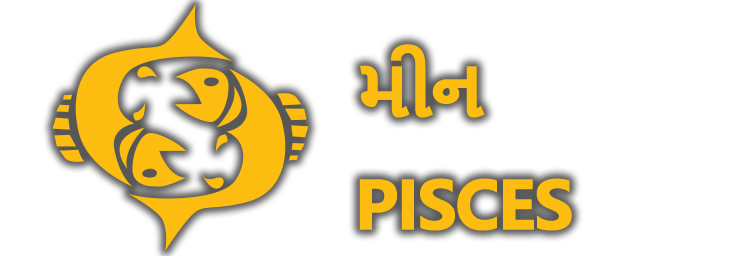
<style>
.page{position:relative;width:749px;height:256px;background:#ffffff}
.page>*{position:absolute;margin:0}
.t1{font:70.8px "NirmalaUI-Bold";letter-spacing:-0.05em;color:#fcbc10;text-transform:uppercase;font-weight:bold}
</style>
<div class="page">
<p class="t1" style="left:360px;top:44px;width:125px;height:74px">મીન</p>
<p class="t1" style="left:359px;top:178px;width:213px;height:53px">Pisces</p>
</div>
